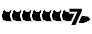
<style>
.page{position:relative;width:92px;height:34px;background:#ffffff}
.page>*{position:absolute;margin:0}
.t1{font:22.4px "DejaVuSans-Bold";color:#000000}
</style>
<div class="page">
<p class="t1" style="left:69px;top:8px;width:13px;height:17px">7</p>
</div>
